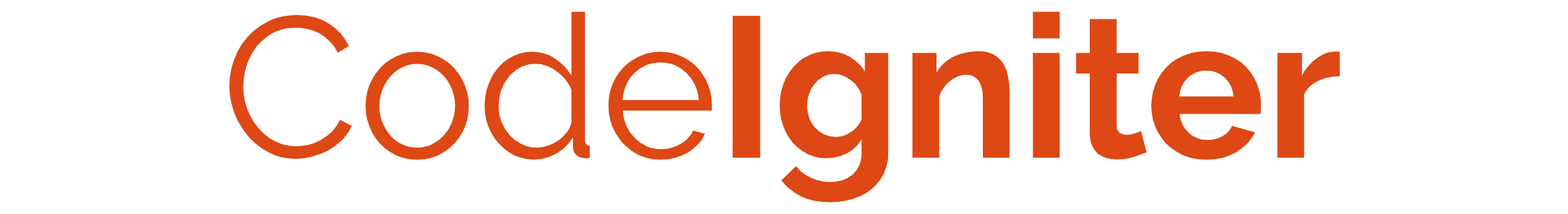
<style>
.page{position:relative;width:1568px;height:214px;background:#ffffff}
.page>*{position:absolute;margin:0}
.t1{font:199.6px "Raleway-Bold";color:#dd4814}
.t2{font:199.6px "Raleway-Regular";color:#dd4814}
</style>
<div class="page">
<p class="t1" style="left:229px;top:11px;width:1111px;height:191px"><span class="t2">Code</span>Igniter</p>
</div>
